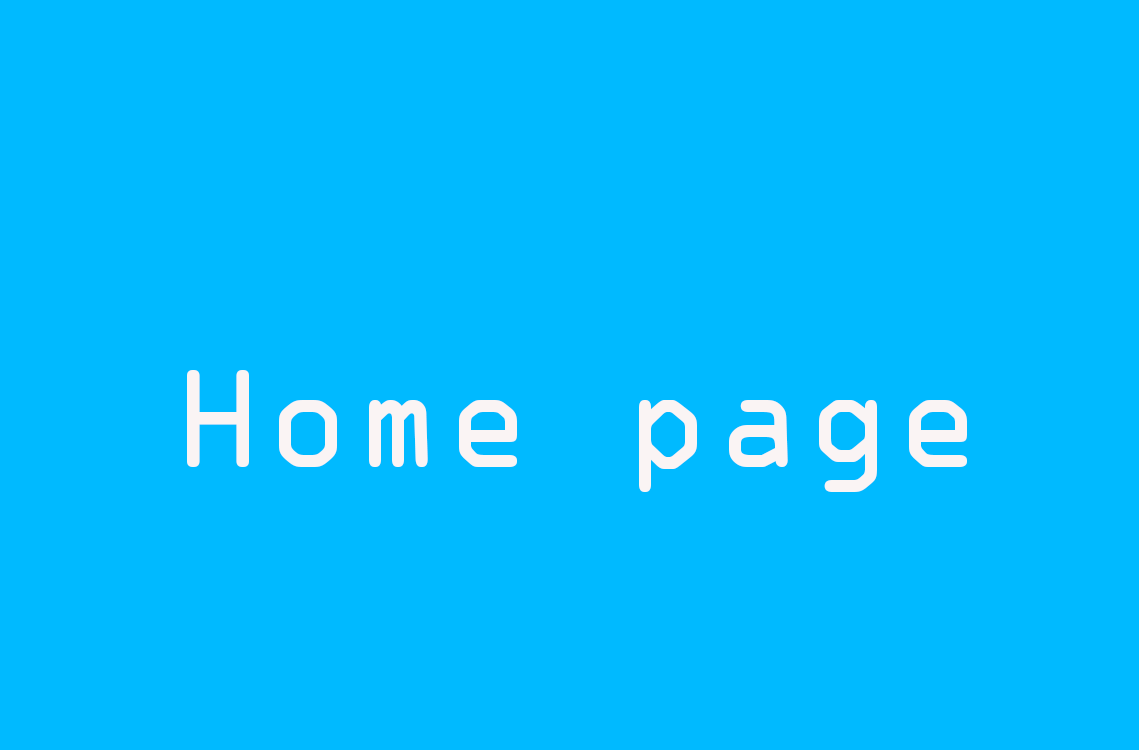
<style>
.page{position:relative;width:1139px;height:750px;background:#00baff}
.page>*{position:absolute;margin:0}
.t1{font:125px "OCRAStd";color:#faf4f4}
</style>
<div class="page">
<p class="t1" style="left:187px;top:370px;width:780px;height:122px">Home page</p>
</div>
